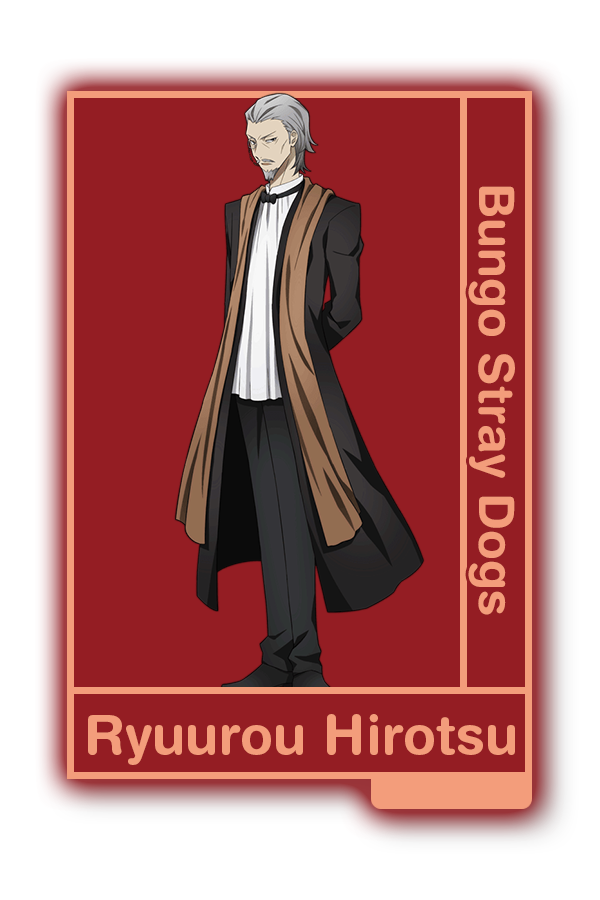
<style>
.page{position:relative;width:600px;height:900px;background:#941d23}
.page>*{position:absolute;margin:0}
.t1{font:48.8px "HelveticaRounded-Bold";color:#f39d7b}
.t2{font:54.3px "HelveticaRounded-Bold";color:#f39d7b}
</style>
<div class="page">
<p class="t1" style="left:468px;top:186px;width:47px;height:429px;rotate:90deg">Bungo Stray Dogs</p>
<p class="t2" style="left:88px;top:714px;width:427px;height:51px">Ryuurou Hirotsu</p>
</div>
